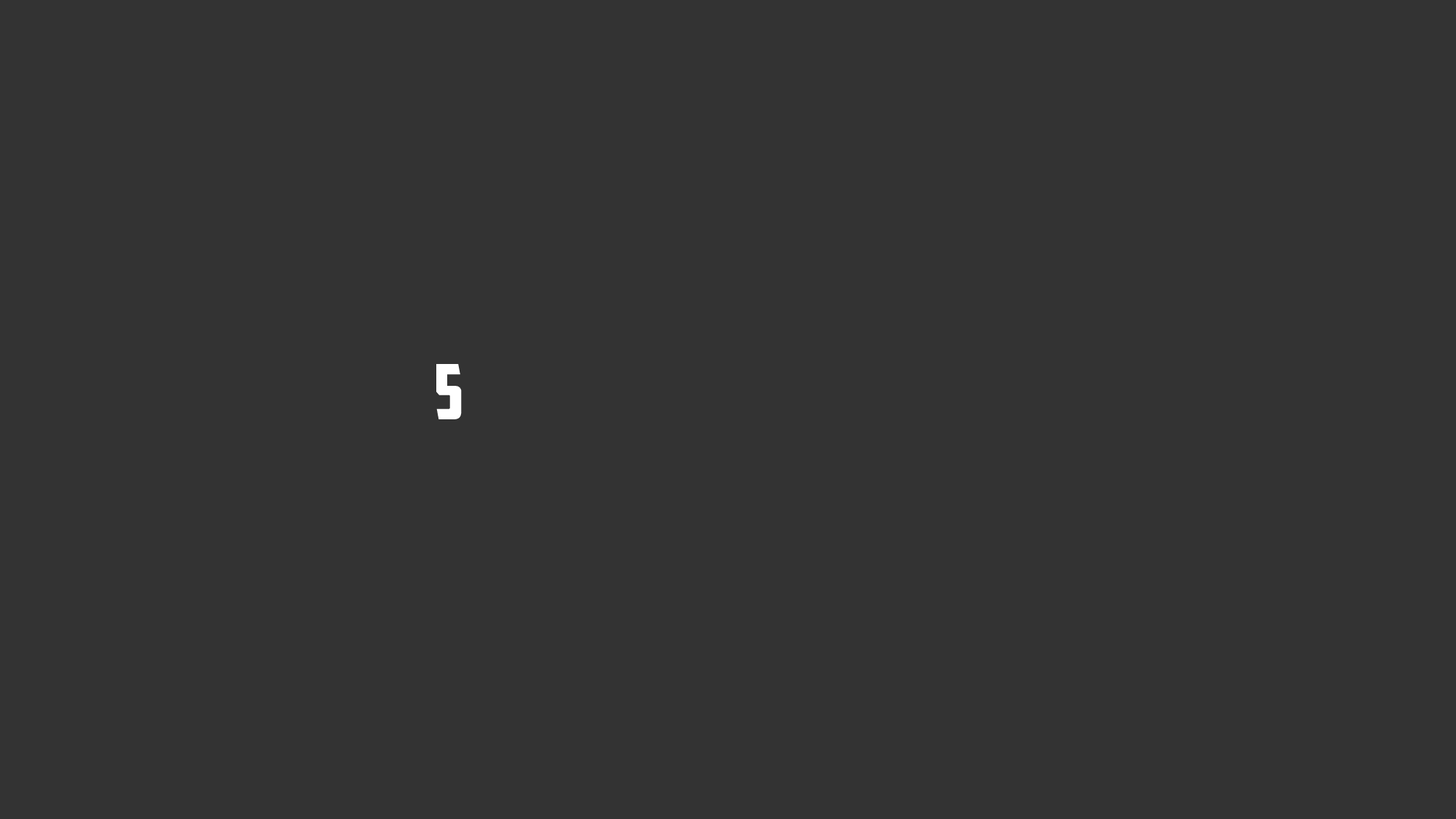
<style>
.page{position:relative;width:1456px;height:819px;background:#333333}
.page>*{position:absolute;margin:0}
.t1{font:75.9px "AmericanCaptain";color:#ffffff}
</style>
<div class="page">
<p class="t1" style="left:436px;top:364px;width:26px;height:55px">5</p>
</div>
